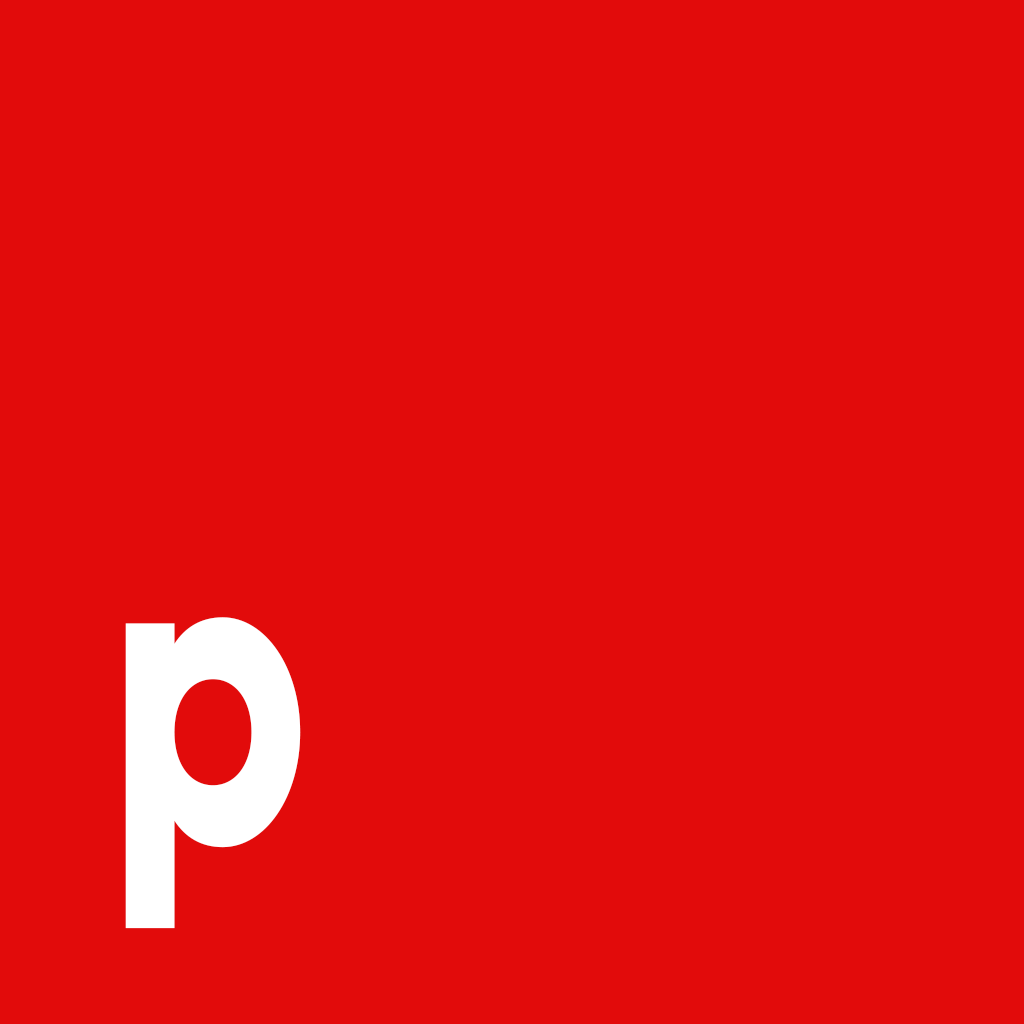
<style>
.page{position:relative;width:1024px;height:1024px;background:#e20b0b}
.page>*{position:absolute;margin:0}
.t1{font:435.1px "Gilroy-ExtraBold";color:#ffffff;scale:0.74 1}
</style>
<div class="page">
<p class="t1" style="left:125px;top:617px;width:176px;height:312px">p</p>
</div>
